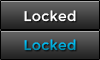
<style>
.page{position:relative;width:100px;height:60px}
.page>*{position:absolute;margin:0}
.t1{font:14px "Montserrat-Regular";letter-spacing:0.025em;color:#ffffff}
.t2{font:14px "Montserrat-Regular";letter-spacing:0.025em}
</style>
<div class="page">
<p class="t1" style="left:24px;top:10px;width:52px;height:12px">Locked</p>
<p class="t2" style="left:24px;top:39px;width:52px;height:12px">Locked</p>
</div>
